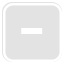
<style>
.page{position:relative;width:64px;height:64px;background:#e3e3e3}
.page>*{position:absolute;margin:0}
.t1{font:48.1px "CenturyGothic-Bold";color:#ffffff;scale:1.74 1}
</style>
<div class="page">
<p class="t1" style="left:21px;top:28px;width:22px;height:6px">-</p>
</div>
